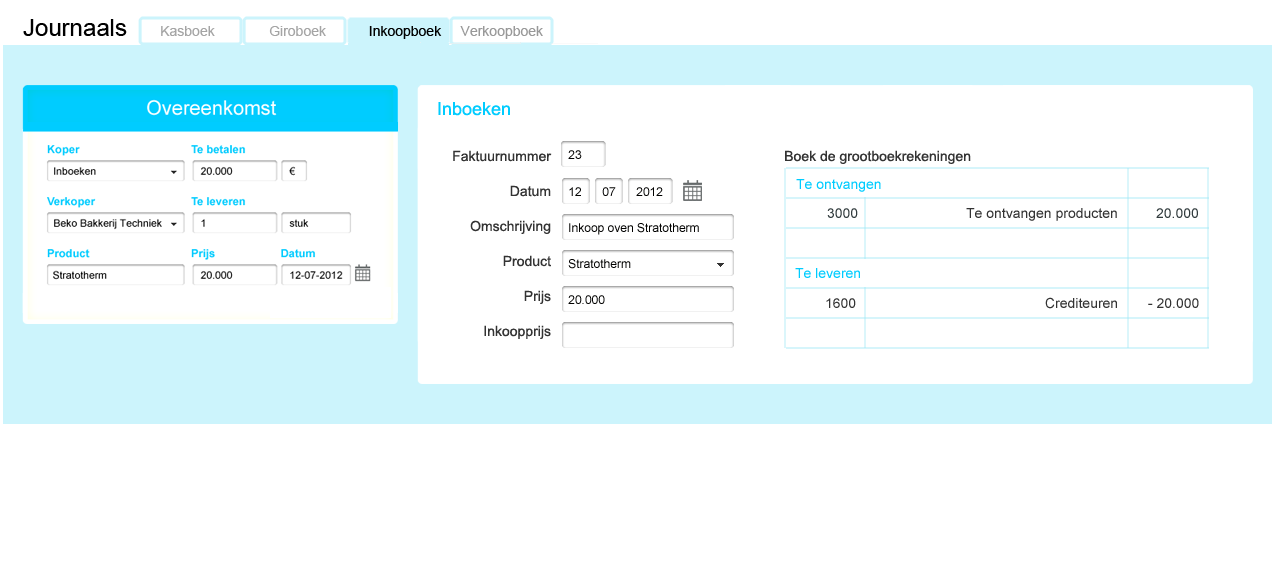
<style>
.page{position:relative;width:1286px;height:583px;background:#ffffff}
.page>*{position:absolute;margin:0}
.t1{font:14px "ArialMT";color:#a5a5a5}
.t2{font:24px "ArialMT";color:#000000}
.t3{font:14px "ArialMT";color:#000000}
.t4{font:14px "ArialMT";color:#999999}
.t5{font:18px "ArialMT";color:#00ccff}
.t6{font:14px/35px "ArialMT";color:#333333}
.t7{font:18px/36px "FoundryMonoline-Medium";color:#333333}
.t8{font:12px "ArialMT";color:#010100}
.t9{font:14px "ArialMT";color:#333333}
.t10{font:18px "FoundryMonoline-Medium";color:#333333}
.t11{font:14px "ArialMT";color:#00ccff}
.t12{font:14px "ArialMT";color:#323c3e}
</style>
<div class="page">
<p class="t1" style="left:23px;top:19px;width:520px;height:20px"><span class="t2">Journaals          </span>Kasboek              Giroboek          <span class="t3"> Inkoopboek     </span><span class="t4">Verkoopboek</span></p>
<p class="t5" style="left:438px;top:102px;width:72px;height:14px">Inboeken</p>
<p class="t6" style="left:453px;top:150px;width:99px;height:189px;text-align:right"><span class="t7"><br></span>Faktuurnummer<br>Datum<br>Omschrijving<br>Product<br>Prijs<br>Inkoopprijs</p>
<p class="t8" style="left:568px;top:150px;width:14px;height:9px">23</p>
<p class="t9" style="left:785px;top:150px;width:186px;height:14px"><span class="t10"><br></span>Boek de grootboekrekeningen</p>
<p class="t11" style="left:796px;top:179px;width:85px;height:13px">Te ontvangen</p>
<p class="t8" style="left:569px;top:187px;width:12px;height:9px">12</p>
<p class="t8" style="left:602px;top:187px;width:14px;height:9px">07</p>
<p class="t8" style="left:636px;top:187px;width:27px;height:9px">2012</p>
<p class="t12" style="left:827px;top:208px;width:31px;height:10px">3000</p>
<p class="t9" style="left:966px;top:208px;width:151px;height:13px">Te ontvangen producten</p>
<p class="t12" style="left:1156px;top:208px;width:42px;height:10px">20.000</p>
<p class="t8" style="left:569px;top:223px;width:130px;height:12px">Inkoop oven Stratotherm</p>
<p class="t8" style="left:568px;top:259px;width:63px;height:10px">Stratotherm</p>
<p class="t11" style="left:795px;top:268px;width:65px;height:10px">Te leveren</p>
<p class="t8" style="left:568px;top:295px;width:37px;height:9px">20.000</p>
<p class="t9" style="left:826px;top:298px;width:30px;height:10px">1600</p>
<p class="t9" style="left:1045px;top:297px;width:72px;height:12px">Crediteuren</p>
<p class="t9" style="left:1148px;top:298px;width:51px;height:10px">- 20.000</p>
</div>
